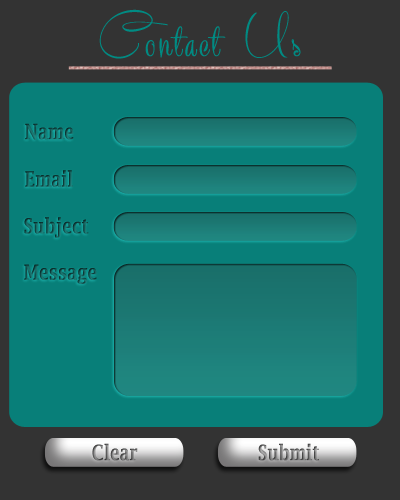
<style>
.page{position:relative;width:400px;height:500px;background:#087f79}
.page>*{position:absolute;margin:0}
.t1{font:66px "RecordaScriptPersonalUseOnly";letter-spacing:0.025em;color:#008b83;font-weight:bold}
.t2{font:20.9px "LucidaBright-Demi";letter-spacing:0.025em;font-weight:bold;scale:0.76 1}
.t3{font:20.7px "LucidaBright-Demi";letter-spacing:0.025em;font-weight:bold;scale:0.77 1}
</style>
<div class="page">
<p class="t1" style="left:99px;top:9px;width:202px;height:50px">Contact Us</p>
<p class="t2" style="left:25px;top:123px;width:49px;height:17px">Name</p>
<p class="t2" style="left:25px;top:170px;width:48px;height:17px">Email</p>
<p class="t3" style="left:24px;top:217px;width:65px;height:21px">Subject</p>
<p class="t3" style="left:24px;top:264px;width:73px;height:20px">Message</p>
<p class="t2" style="left:92px;top:443px;width:46px;height:18px">Clear</p>
<p class="t2" style="left:258px;top:443px;width:61px;height:18px">Submit</p>
</div>
